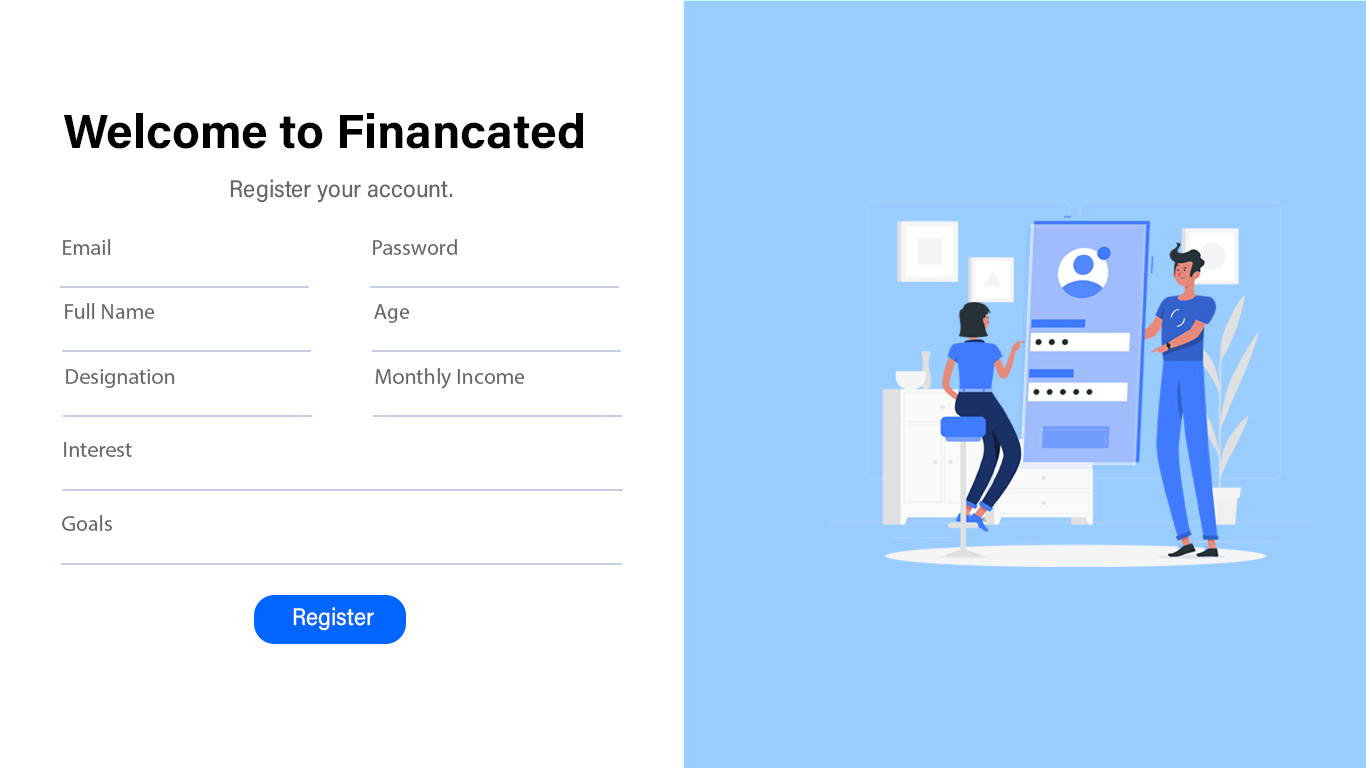
<style>
.page{position:relative;width:1366px;height:768px;background:#ffffff}
.page>*{position:absolute;margin:0}
.t1{font:48px "AcuminConcept-Bold";color:#000000}
.t2{font:24px "AcuminConcept-SemiCondensed";color:#666666}
.t3{font:22px "MyriadPro-Regular";color:#666666}
.t4{font:24px "AcuminConcept-SemiCondensed";color:#ffffff}
</style>
<div class="page">
<p class="t1" style="left:63px;top:113px;width:520px;height:36px">Welcome to Financated</p>
<p class="t2" style="left:230px;top:179px;width:223px;height:24px">Register your account.</p>
<p class="t3" style="left:63px;top:239px;width:48px;height:16px">Email</p>
<p class="t3" style="left:373px;top:239px;width:84px;height:16px">Password</p>
<p class="t3" style="left:65px;top:303px;width:90px;height:16px">Full Name</p>
<p class="t3" style="left:374px;top:304px;width:36px;height:19px">Age</p>
<p class="t3" style="left:66px;top:369px;width:109px;height:19px">Designation</p>
<p class="t3" style="left:375px;top:368px;width:150px;height:21px">Monthly Income</p>
<p class="t3" style="left:64px;top:442px;width:68px;height:15px">Interest</p>
<p class="t3" style="left:62px;top:515px;width:50px;height:16px">Goals</p>
<p class="t4" style="left:293px;top:607px;width:81px;height:24px">Register</p>
</div>
